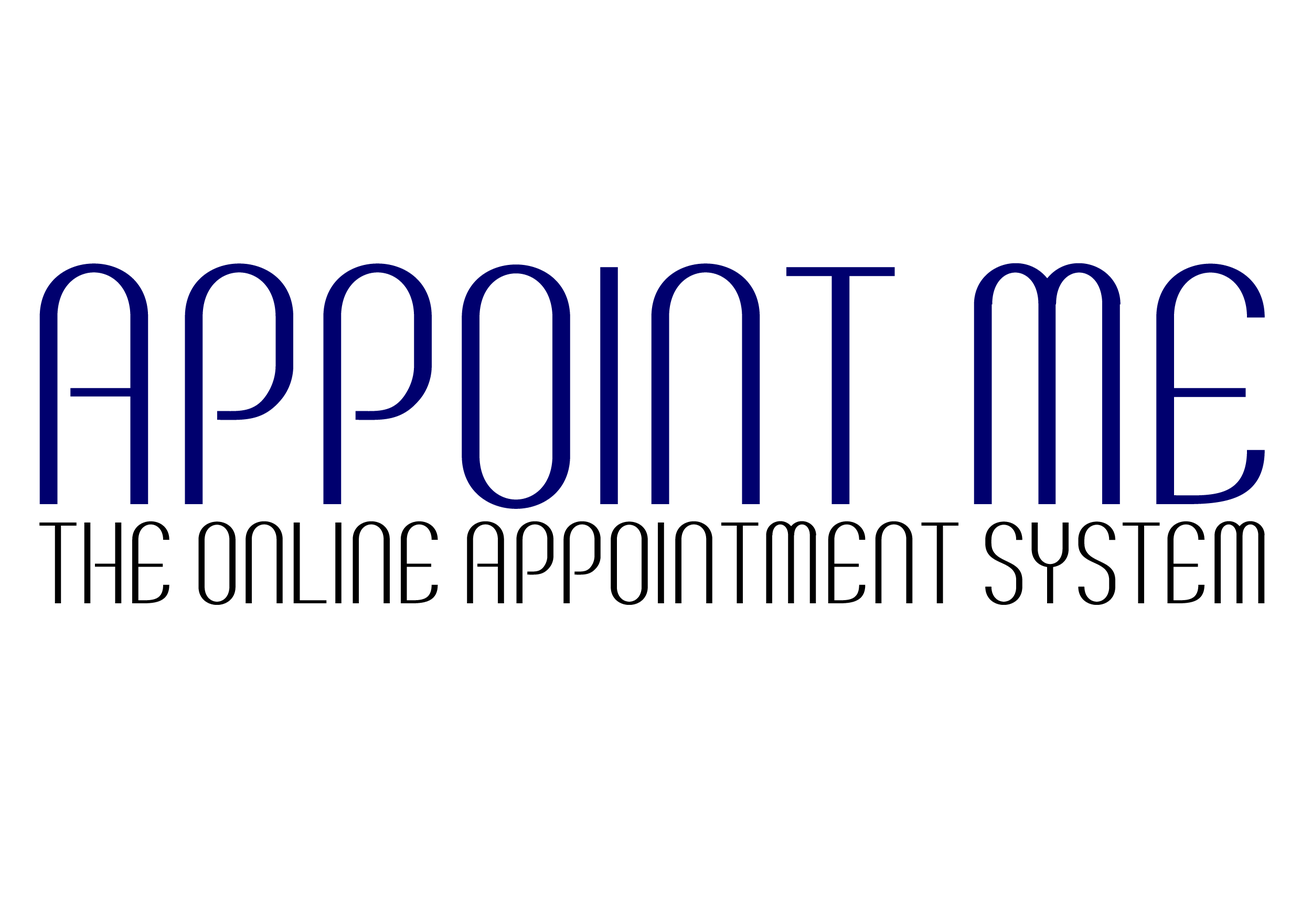
<style>
.page{position:relative;width:1301px;height:917px;background:#ffffff}
.page>*{position:absolute;margin:0}
.t1{font:487.3px "BreveSC";color:#00006e}
.t2{font:166px "BreveSC";color:#000000}
</style>
<div class="page">
<p class="t1" style="left:39px;top:263px;width:1225px;height:246px">appoint me</p>
<p class="t2" style="left:39px;top:521px;width:1225px;height:84px">the online appointment system</p>
</div>
